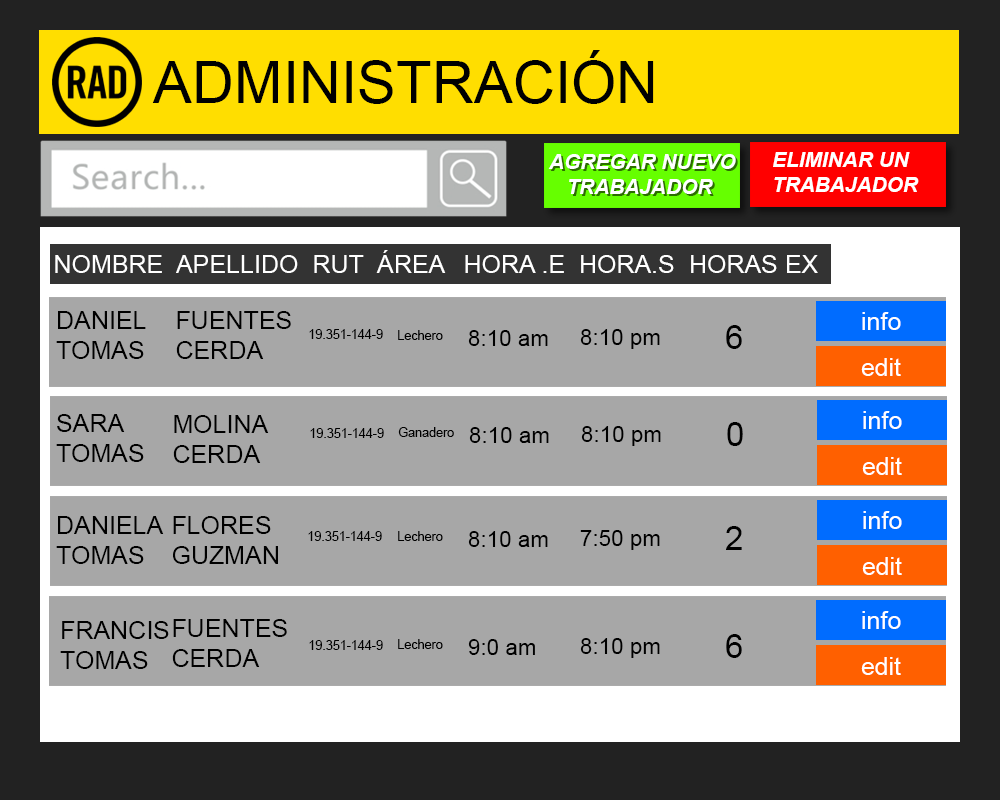
<style>
.page{position:relative;width:1000px;height:800px;background:#a7a7a7}
.page>*{position:absolute;margin:0}
.t1{font:58.3px "ArialMT";color:#000000}
.t2{font:20.8px "Arial-BoldItalicMT";color:#ffffff}
.t3{font:25px "ArialMT";color:#ffffff}
.t4{font:25px "ArialMT";color:#000000}
.t5{font:12.5px "ArialMT";color:#000000}
.t6{font:22.5px "ArialMT";color:#000000}
.t7{font:33.4px "ArialMT";color:#000000}
</style>
<div class="page">
<p class="t1" style="left:152px;top:50px;width:502px;height:54px">ADMINISTRACIÓN</p>
<p class="t2" style="left:548px;top:154px;width:188px;height:40px">AGREGAR NUEVO          TRABAJADOR</p>
<p class="t2" style="left:773px;top:152px;width:146px;height:40px">ELIMINAR UN          TRABAJADOR</p>
<p class="t3" style="left:55px;top:250px;width:763px;height:23px">NOMBRE  APELLIDO  RUT  ÁREA   HORA .E  HORA.S  HORAS EX</p>
<p class="t4" style="left:56px;top:311px;width:90px;height:48px">DANIEL<br>TOMAS</p>
<p class="t4" style="left:176px;top:311px;width:115px;height:48px">FUENTES<br>CERDA</p>
<p class="t3" style="left:862px;top:312px;width:39px;height:18px">info</p>
<p class="t5" style="left:309px;top:329px;width:74px;height:10px">19.351-144-9</p>
<p class="t6" style="left:580px;top:329px;width:80px;height:20px">8:10 pm</p>
<p class="t7" style="left:726px;top:325px;width:16px;height:24px">6</p>
<p class="t5" style="left:398px;top:330px;width:45px;height:10px">Lechero</p>
<p class="t6" style="left:468px;top:330px;width:80px;height:16px">8:10 am</p>
<p class="t3" style="left:861px;top:358px;width:40px;height:18px">edit</p>
<p class="t4" style="left:56px;top:414px;width:88px;height:48px">SARA<br>TOMAS</p>
<p class="t3" style="left:863px;top:411px;width:39px;height:18px">info</p>
<p class="t4" style="left:173px;top:415px;width:96px;height:48px">MOLINA<br>CERDA</p>
<p class="t7" style="left:727px;top:422px;width:16px;height:24px">0</p>
<p class="t5" style="left:310px;top:428px;width:74px;height:10px">19.351-144-9</p>
<p class="t5" style="left:398px;top:427px;width:56px;height:10px">Ganadero</p>
<p class="t6" style="left:469px;top:427px;width:80px;height:16px">8:10 am</p>
<p class="t6" style="left:581px;top:426px;width:80px;height:20px">8:10 pm</p>
<p class="t3" style="left:862px;top:457px;width:40px;height:18px">edit</p>
<p class="t4" style="left:56px;top:516px;width:108px;height:48px">DANIELA<br>TOMAS</p>
<p class="t4" style="left:173px;top:516px;width:105px;height:48px">FLORES<br>GUZMAN</p>
<p class="t3" style="left:863px;top:511px;width:39px;height:18px">info</p>
<p class="t5" style="left:308px;top:531px;width:74px;height:10px">19.351-144-9</p>
<p class="t5" style="left:398px;top:531px;width:45px;height:10px">Lechero</p>
<p class="t6" style="left:468px;top:531px;width:80px;height:16px">8:10 am</p>
<p class="t6" style="left:580px;top:530px;width:80px;height:20px">7:50 pm</p>
<p class="t7" style="left:726px;top:526px;width:16px;height:24px">2</p>
<p class="t3" style="left:862px;top:557px;width:40px;height:18px">edit</p>
<p class="t3" style="left:862px;top:611px;width:39px;height:18px">info</p>
<p class="t4" style="left:60px;top:621px;width:109px;height:48px">FRANCIS<br>TOMAS</p>
<p class="t4" style="left:172px;top:619px;width:115px;height:48px">FUENTES<br>CERDA</p>
<p class="t5" style="left:309px;top:640px;width:74px;height:10px">19.351-144-9</p>
<p class="t5" style="left:398px;top:639px;width:45px;height:10px">Lechero</p>
<p class="t6" style="left:468px;top:639px;width:67px;height:16px">9:0 am</p>
<p class="t6" style="left:580px;top:638px;width:80px;height:20px">8:10 pm</p>
<p class="t7" style="left:726px;top:634px;width:16px;height:24px">6</p>
<p class="t3" style="left:861px;top:657px;width:40px;height:18px">edit</p>
</div>
